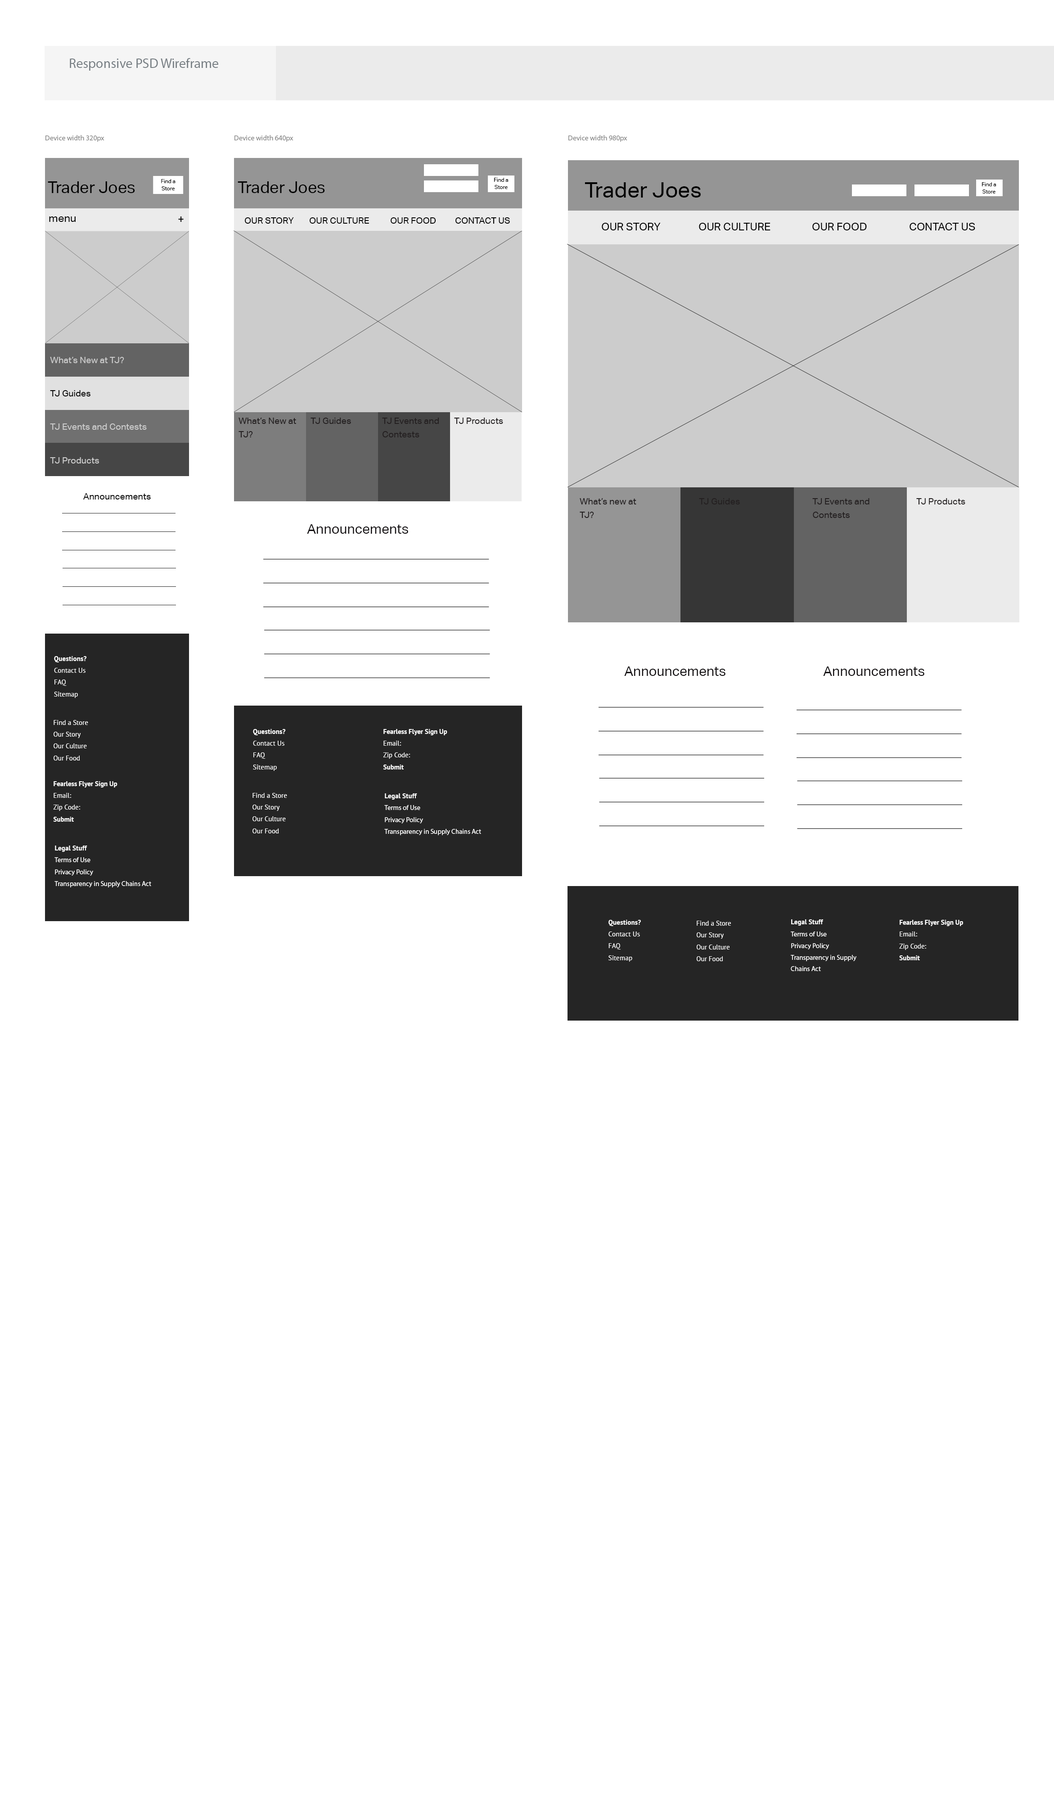
<style>
.page{position:relative;width:1054px;height:1800px;background:#ffffff}
.page>*{position:absolute;margin:0}
.t1{font:13.5px "MyriadPro-Regular";color:#787f84}
.t2{font:7.2px "MyriadPro-Regular";color:#878787}
.t3{font:16.2px "AktivGrotesk-Regular";color:#000000}
.t4{font:5.4px/6.3px "AktivGrotesk-Regular";color:#000000}
.t5{font:21.6px "AktivGrotesk-Regular";color:#000000}
.t6{font:10.8px "AktivGrotesk-Regular";color:#000000}
.t7{font:9px "AktivGrotesk-Regular";color:#000000}
.t8{font:9px "AktivGrotesk-Regular";color:#cccccc}
.t9{font:9px/13.5px "AktivGrotesk-Regular";color:#231f20}
.t10{font:9px "AktivGrotesk-Regular";color:#231f20}
.t11{font:13.5px "AktivGrotesk-Regular";color:#131012}
.t12{font:6.9px/11.2px "PTSans-Regular";color:#ffffff}
.t13{font:6.9px/11.2px "PTSans-Bold";color:#ffffff}
.t14{font:6.7px/11.2px "PTSans-Regular";color:#ffffff}
.t15{font:6.7px/11.2px "PTSans-Bold";color:#ffffff}
.t16{font:6.7px/11.2px "MyriadPro-Regular";color:#ffffff}
</style>
<div class="page">
<p class="t1" style="left:70px;top:58px;width:148px;height:13px">Responsive PSD Wireframe</p>
<p class="t2" style="left:45px;top:135px;width:59px;height:7px">Device width 320px</p>
<p class="t2" style="left:234px;top:135px;width:59px;height:7px">Device width 640px</p>
<p class="t2" style="left:568px;top:135px;width:59px;height:7px">Device width 980px</p>
<p class="t3" style="left:48px;top:181px;width:87px;height:12px">Trader Joes</p>
<p class="t4" style="left:161px;top:179px;width:15px;height:11px;text-align:center">Find a <br>Store</p>
<p class="t3" style="left:238px;top:181px;width:87px;height:12px">Trader Joes</p>
<p class="t4" style="left:494px;top:178px;width:14px;height:11px;text-align:center">Find a <br>Store</p>
<p class="t5" style="left:585px;top:182px;width:116px;height:16px">Trader Joes</p>
<p class="t4" style="left:982px;top:182px;width:14px;height:12px;text-align:center">Find a <br>Store</p>
<p class="t6" style="left:49px;top:216px;width:27px;height:6px">menu</p>
<p class="t6" style="left:178px;top:216px;width:6px;height:6px">+</p>
<p class="t7" style="left:245px;top:217px;width:265px;height:7px">OUR STORY  OUR CULTURE   OUR FOOD   CONTACT US</p>
<p class="t6" style="left:602px;top:223px;width:373px;height:7px">OUR STORY   OUR CULTURE    OUR FOOD    CONTACT US</p>
<p class="t8" style="left:50px;top:357px;width:74px;height:6px">What’s New at TJ?</p>
<p class="t7" style="left:50px;top:390px;width:40px;height:6px">TJ Guides</p>
<p class="t8" style="left:50px;top:423px;width:97px;height:7px">TJ Events and Contests</p>
<p class="t9" style="left:238px;top:418px;width:58px;height:19px">What’s New at TJ?</p>
<p class="t10" style="left:310px;top:418px;width:41px;height:6px">TJ Guides</p>
<p class="t9" style="left:382px;top:418px;width:57px;height:19px">TJ Events and Contests</p>
<p class="t10" style="left:454px;top:418px;width:49px;height:6px">TJ Products</p>
<p class="t8" style="left:50px;top:457px;width:49px;height:7px">TJ Products</p>
<p class="t7" style="left:83px;top:493px;width:68px;height:7px">Announcements</p>
<p class="t9" style="left:580px;top:498px;width:56px;height:20px">What’s new at TJ?</p>
<p class="t10" style="left:699px;top:498px;width:41px;height:6px">TJ Guides</p>
<p class="t9" style="left:812px;top:498px;width:57px;height:20px">TJ Events and Contests</p>
<p class="t10" style="left:916px;top:498px;width:49px;height:6px">TJ Products</p>
<p class="t11" style="left:307px;top:524px;width:101px;height:10px">Announcements</p>
<p class="t12" style="left:54px;top:656px;width:32px;height:42px"><span class="t13">Questions?<br></span>Contact Us<br>FAQ<br>Sitemap</p>
<p class="t11" style="left:624px;top:666px;width:101px;height:10px">Announcements</p>
<p class="t11" style="left:823px;top:666px;width:101px;height:10px">Announcements</p>
<p class="t14" style="left:54px;top:720px;width:34px;height:40px">Find a Store<br>Our Story<br>Our Culture<br>Our Food</p>
<p class="t12" style="left:253px;top:729px;width:32px;height:42px"><span class="t13">Questions?<br></span>Contact Us<br>FAQ<br>Sitemap</p>
<p class="t15" style="left:383px;top:729px;width:64px;height:41px">Fearless Flyer Sign Up<br><span class="t14">Email:<br>Zip Code:<br></span>Submit<br><span class="t14">Sug</span></p>
<p class="t15" style="left:53px;top:781px;width:64px;height:41px">Fearless Flyer Sign Up<br><span class="t14">Email:<br>Zip Code:<br></span>Submit<br><span class="t14">Sug</span></p>
<p class="t14" style="left:252px;top:793px;width:35px;height:40px">Find a Store<br>Our Story<br>Our Culture<br>Our Food</p>
<p class="t16" style="left:384px;top:793px;width:97px;height:42px"><span class="t13">Legal Stuff<br></span>Terms of Use<br>Privacy Policy<br>Transparency in Supply Chains Act</p>
<p class="t16" style="left:54px;top:846px;width:97px;height:41px"><span class="t13">Legal Stuff<br></span>Terms of Use<br>Privacy Policy<br>Transparency in Supply Chains Act</p>
<p class="t12" style="left:608px;top:920px;width:33px;height:42px"><span class="t13">Questions?<br></span>Contact Us<br>FAQ<br>Sitemap</p>
<p class="t14" style="left:697px;top:921px;width:34px;height:40px">Find a Store<br>Our Story<br>Our Culture<br>Our Food</p>
<p class="t16" style="left:791px;top:919px;width:65px;height:52px"><span class="t13">Legal Stuff<br></span>Terms of Use<br>Privacy Policy<br>Transparency in Supply Chains Act</p>
<p class="t15" style="left:899px;top:920px;width:64px;height:40px">Fearless Flyer Sign Up<br><span class="t14">Email:<br>Zip Code:<br></span>Submit<br><span class="t14">Sug</span></p>
</div>
